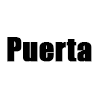
<style>
.page{position:relative;width:100px;height:100px;background:#ffffff}
.page>*{position:absolute;margin:0}
.t1{font:30px "Impact";color:#000000;font-weight:bold}
</style>
<div class="page">
<p class="t1" style="left:7px;top:37px;width:85px;height:25px">Puerta</p>
</div>
